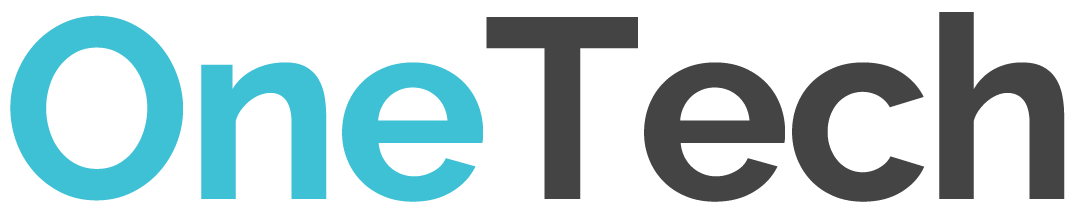
<style>
.page{position:relative;width:1080px;height:214px;background:#ffffff}
.page>*{position:absolute;margin:0}
.t1{font:255.5px "Raleway-Bold";letter-spacing:-0.02em;color:#444444}
.t2{font:255.5px "Raleway-Bold";letter-spacing:-0.02em;color:#3ec1d5}
</style>
<div class="page">
<p class="t1" style="left:10px;top:12px;width:1055px;height:190px"><span class="t2">One</span>Tech</p>
</div>
